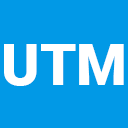
<style>
.page{position:relative;width:128px;height:128px;background:#0199e6}
.page>*{position:absolute;margin:0}
.t1{font:58px "Roboto-Black";color:#ffffff}
</style>
<div class="page">
<p class="t1" style="left:4px;top:44px;width:120px;height:42px">UTM</p>
</div>
